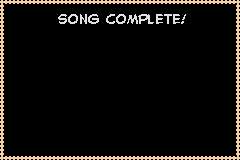
<style>
.page{position:relative;width:240px;height:160px;background:#000000}
.page>*{position:absolute;margin:0}
.t1{font:12px "CCAstroCity";color:#e0e0e2}
</style>
<div class="page">
<p class="t1" style="left:58px;top:14px;width:128px;height:10px">Song complete!</p>
</div>
